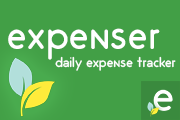
<style>
.page{position:relative;width:180px;height:120px;background:#429f46}
.page>*{position:absolute;margin:0}
.t1{font:41.9px "OdinRounded-Light";color:#ffffff}
.t2{font:13.9px "OdinRounded-Light";color:#ffffff}
</style>
<div class="page">
<p class="t1" style="left:8px;top:28px;width:152px;height:32px">expenser</p>
<p class="t2" style="left:55px;top:56px;width:121px;height:15px">daily expense tracker</p>
</div>
